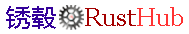
<style>
.page{position:relative;width:189px;height:34px;background:#ffffff}
.page>*{position:absolute;margin:0}
.t1{font:25px "Georgia";color:#a40000}
.t2{font:25px "MicrosoftYaHei";color:#330099}
.t3{font:25px "Georgia";color:#ff3333}
</style>
<div class="page">
<p class="t1" style="left:6px;top:6px;width:177px;height:23px"><span class="t2">锈毂    </span>Rust<span class="t3">Hub</span></p>
</div>
